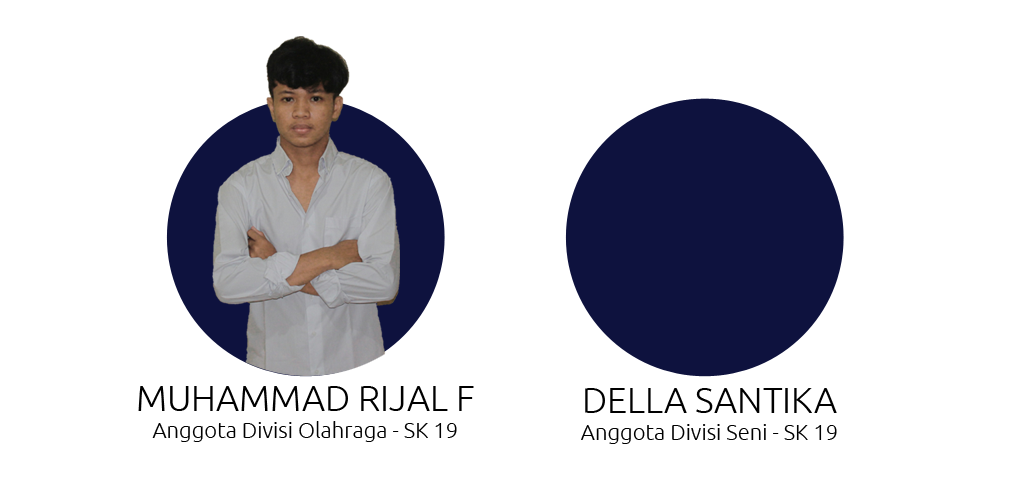
<style>
.page{position:relative;width:1024px;height:500px;background:#ffffff}
.page>*{position:absolute;margin:0}
.t1{font:22px "Ubuntu-Light";color:#000000}
.t2{font:36px "Ubuntu-Light";color:#000000}
</style>
<div class="page">
<p class="t1" style="left:138px;top:386px;width:336px;height:56px;text-align:center"><span class="t2">MUHAMMAD RIJAL F<br></span>Anggota Divisi Olahraga - SK 19</p>
<p class="t1" style="left:581px;top:388px;width:256px;height:56px;text-align:center"><span class="t2">DELLA SANTIKA<br></span>Anggota Divisi Seni - SK 19</p>
</div>
